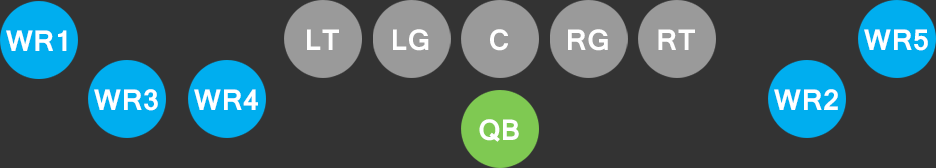
<style>
.page{position:relative;width:936px;height:168px;background:#333333}
.page>*{position:absolute;margin:0}
.t1{font:31.8px "Vrinda-Bold";color:#ffffff}
</style>
<div class="page">
<p class="t1" style="left:6px;top:30px;width:61px;height:21px">WR1</p>
<p class="t1" style="left:307px;top:29px;width:32px;height:21px">LT</p>
<p class="t1" style="left:393px;top:29px;width:36px;height:22px">LG</p>
<p class="t1" style="left:490px;top:29px;width:18px;height:22px">C</p>
<p class="t1" style="left:568px;top:29px;width:40px;height:22px">RG</p>
<p class="t1" style="left:658px;top:29px;width:37px;height:21px">RT</p>
<p class="t1" style="left:864px;top:29px;width:64px;height:22px">WR5</p>
<p class="t1" style="left:94px;top:89px;width:64px;height:22px">WR3</p>
<p class="t1" style="left:194px;top:89px;width:64px;height:21px">WR4</p>
<p class="t1" style="left:774px;top:89px;width:64px;height:21px">WR2</p>
<p class="t1" style="left:479px;top:119px;width:40px;height:23px">QB</p>
</div>
